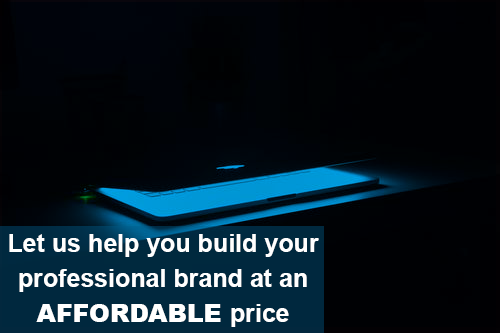
<style>
.page{position:relative;width:500px;height:333px;background:#000104}
.page>*{position:absolute;margin:0}
.t1{font:25px/35px "Arial-BoldMT";color:#ffffff}
.t2{font:25px/35px "Arial-Black";color:#ffffff}
</style>
<div class="page">
<p class="t1" style="left:9px;top:234px;width:310px;height:93px;text-align:center">Let us help you build your professional brand at an <span class="t2">AFFORDABLE </span>price</p>
</div>
